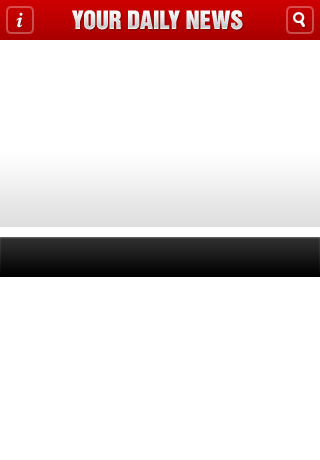
<style>
.page{position:relative;width:320px;height:460px;background:#ffffff}
.page>*{position:absolute;margin:0}
.t1{font:20px "TimesEuropaLTStd-BoldItalic";color:#ffffff}
.t2{font:23px "HelveticaInseratLTStd-Roman";color:#e7e7e7}
</style>
<div class="page">
<p class="t1" style="left:16px;top:12px;width:7px;height:16px">i</p>
<p class="t2" style="left:72px;top:10px;width:171px;height:20px">YOUR DAILY NEWS</p>
</div>
